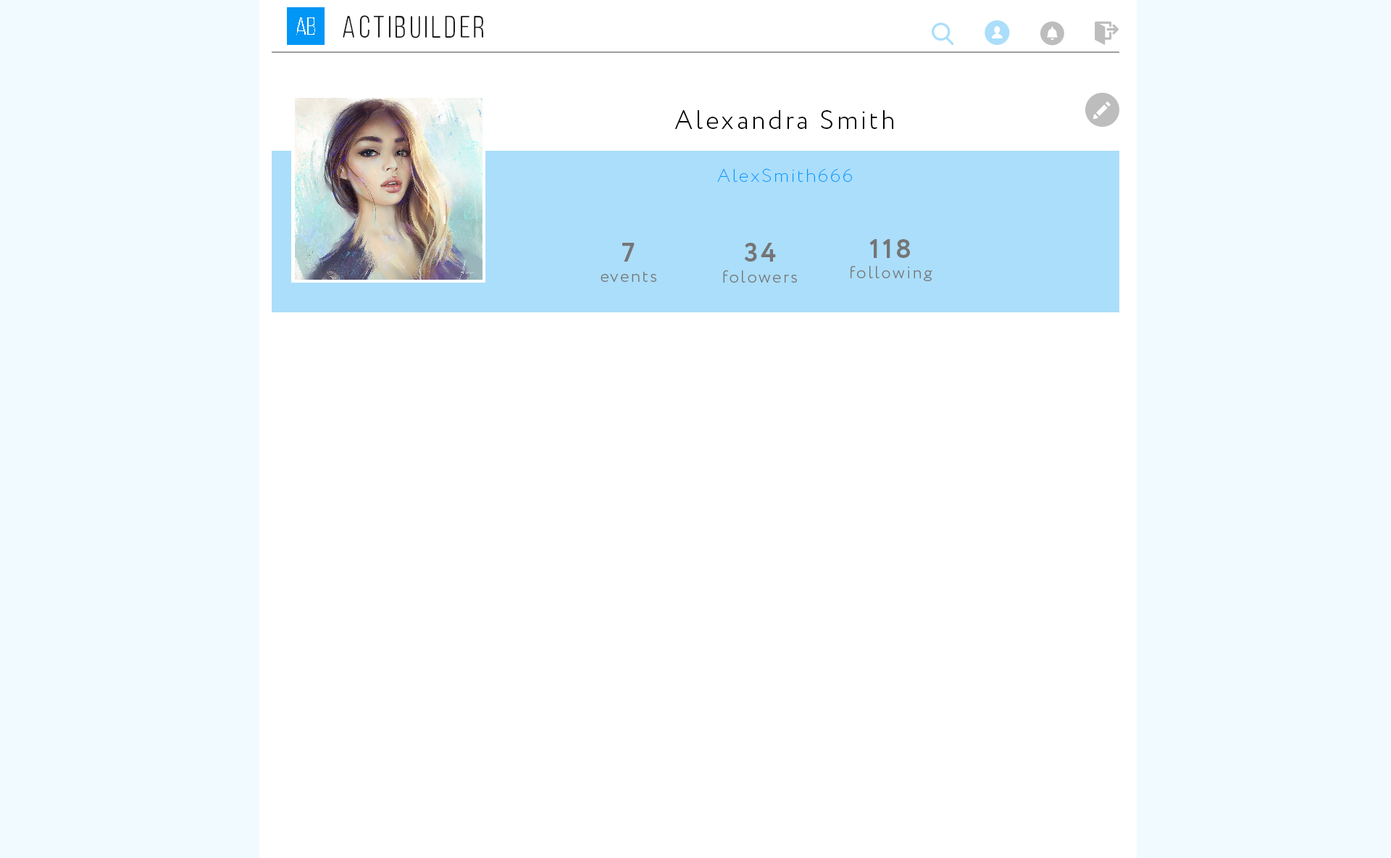
<style>
.page{position:relative;width:1391px;height:858px;background:#ffffff}
.page>*{position:absolute;margin:0}
.t1{font:31px "ClutchSans-Regular";letter-spacing:0.1em;color:#1b1b1b}
.t2{font:26.1px "Circe-Light";letter-spacing:0.1em;color:#000000}
.t3{font:18.8px "Circe-ExtraLight";letter-spacing:0.1em;color:#0099ff}
.t4{font:17.3px "Circe-Light";letter-spacing:0.1em;color:#757575}
.t5{font:27px "Circe-Bold";letter-spacing:0.1em;color:#757575}
</style>
<div class="page">
<p class="t1" style="left:343px;top:15px;width:141px;height:23px">Actibuilder</p>
<p class="t2" style="left:674px;top:110px;width:220px;height:19px">Alexandra Smith</p>
<p class="t3" style="left:717px;top:169px;width:135px;height:13px">AlexSmith666</p>
<p class="t4" style="left:600px;top:243px;width:56px;height:39px;text-align:center"><span class="t5">7<br></span>events</p>
<p class="t4" style="left:723px;top:243px;width:74px;height:39px;text-align:center"><span class="t5">34<br></span>folowers</p>
<p class="t4" style="left:850px;top:239px;width:82px;height:42px;text-align:center"><span class="t5">118<br></span>following</p>
</div>
